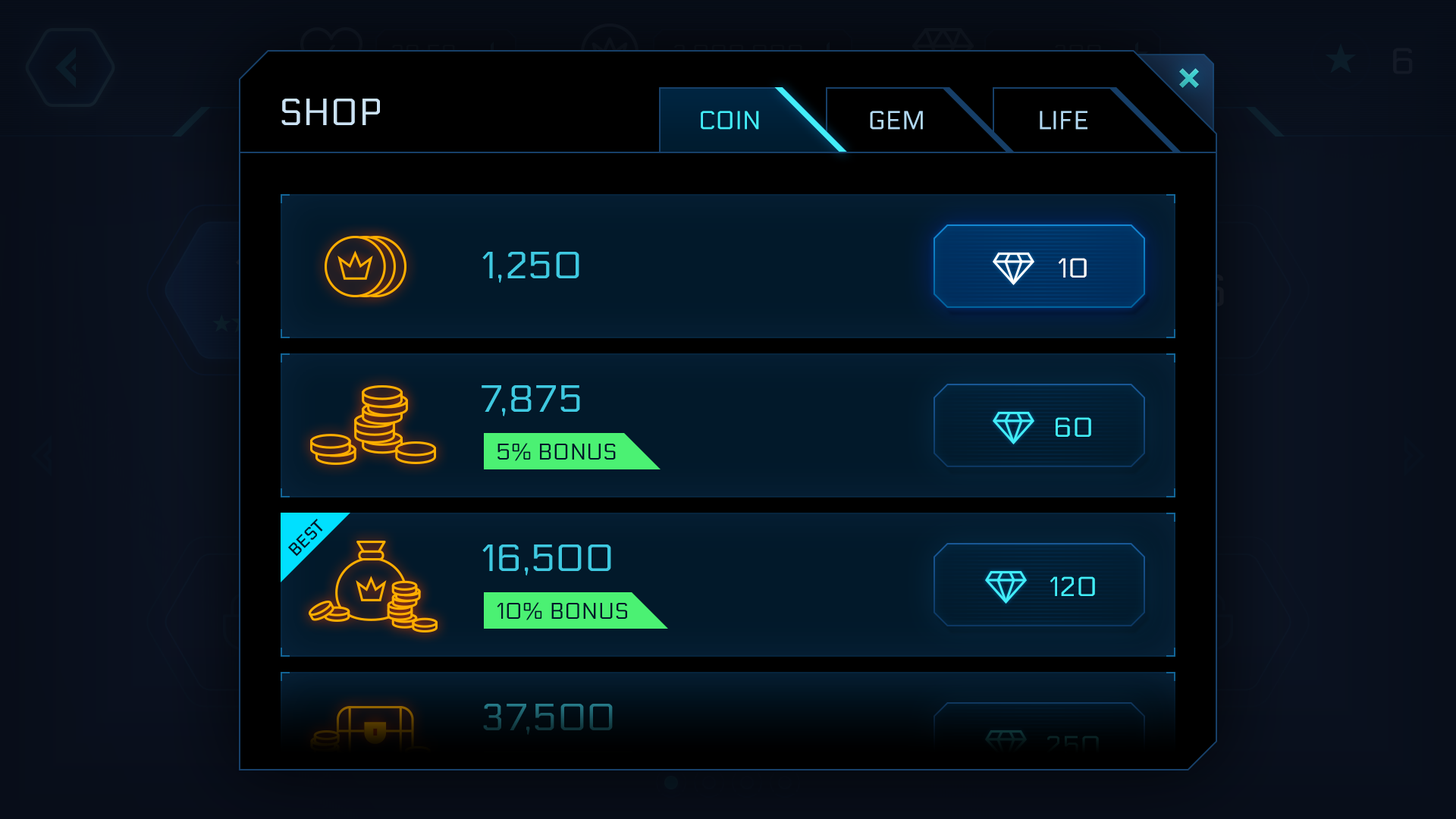
<style>
.page{position:relative;width:1456px;height:819px}
.page>*{position:absolute;margin:0}
.t1{font:37.9px "Electrolize-Regular";color:#cbe2f4;text-transform:uppercase}
.t2{font:25.8px "Electrolize-Regular";color:#43edf8;text-transform:uppercase}
.t3{font:25.8px "Electrolize-Regular";color:#b1d8f1;text-transform:uppercase}
.t4{font:37.9px "Electrolize-Regular";color:#3fc9e1;text-transform:uppercase}
.t5{font:27.3px "Electrolize-Regular";color:#ffffff;text-transform:uppercase}
.t6{font:27.3px "Electrolize-Regular";color:#42edf8;text-transform:uppercase}
.t7{font:22.7px "Electrolize-Regular";color:#02192a;text-transform:uppercase}
.t8{font:16.7px "Electrolize-Regular";color:#021a2b;text-transform:uppercase;font-weight:bold}
.t9{font:37.9px "Electrolize-Regular";text-transform:uppercase}
.t10{font:27.3px "Electrolize-Regular";color:#051112;text-transform:uppercase}
</style>
<div class="page">
<p class="t1" style="left:281px;top:99px;width:99px;height:26px">SHOP</p>
<p class="t2" style="left:701px;top:111px;width:58px;height:19px">coin</p>
<p class="t2" style="left:701px;top:111px;width:58px;height:19px">coin</p>
<p class="t3" style="left:870px;top:111px;width:53px;height:19px">Gem</p>
<p class="t3" style="left:1040px;top:111px;width:47px;height:19px">life</p>
<p class="t4" style="left:482px;top:252px;width:97px;height:31px">1,250</p>
<p class="t5" style="left:1058px;top:258px;width:29px;height:20px">10</p>
<p class="t5" style="left:1058px;top:258px;width:29px;height:20px">10</p>
<p class="t4" style="left:482px;top:385px;width:98px;height:31px">7,875</p>
<p class="t6" style="left:1056px;top:417px;width:35px;height:20px">60</p>
<p class="t7" style="left:497px;top:443px;width:119px;height:18px">5% Bonus</p>
<p class="t8" style="left:288px;top:519px;width:35px;height:38px;rotate:-45deg">BEST</p>
<p class="t4" style="left:482px;top:544px;width:129px;height:32px">16,500</p>
<p class="t6" style="left:1050px;top:576px;width:45px;height:20px">120</p>
<p class="t7" style="left:497px;top:602px;width:130px;height:18px">10% Bonus</p>
<p class="t9" style="left:483px;top:704px;width:130px;height:31px">37,500</p>
<p class="t10" style="left:1046px;top:736px;width:53px;height:19px">250</p>
</div>
